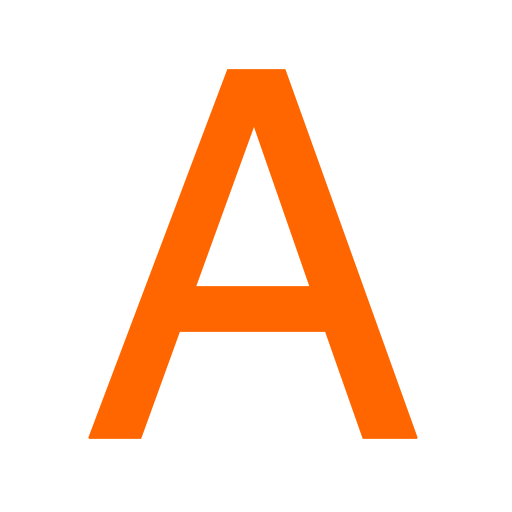
<style>
.page{position:relative;width:512px;height:512px;background:#ffffff}
.page>*{position:absolute;margin:0}
.t1{font:512px "Helvetica";letter-spacing:0.05em;color:#ff6600;font-weight:bold}
</style>
<div class="page">
<p class="t1" style="left:88px;top:69px;width:330px;height:370px">A</p>
</div>
